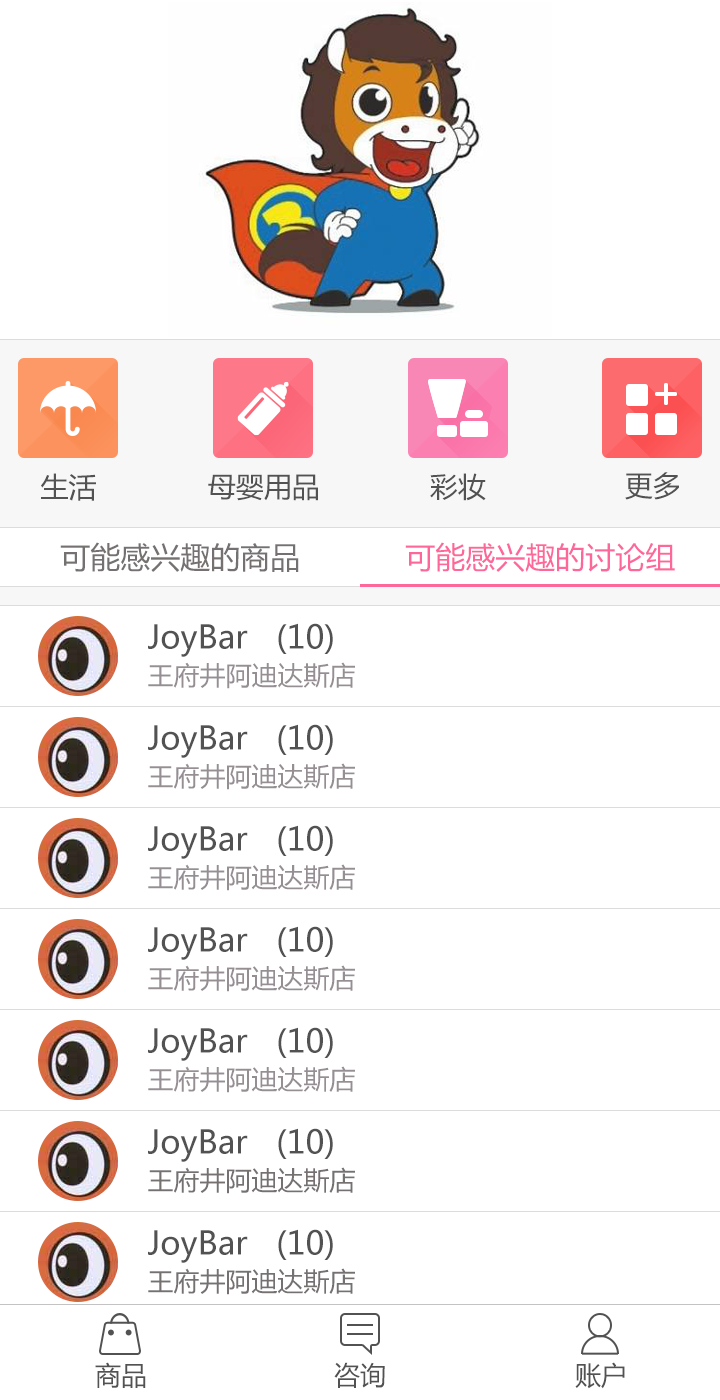
<style>
.page{position:relative;width:720px;height:1400px;background:#ffffff}
.page>*{position:absolute;margin:0}
.t1{font:28px "MicrosoftYaHei";color:#525252}
.t2{font:30px "MicrosoftYaHei";color:#757171}
.t3{font:30px "MicrosoftYaHei";color:#fd679a}
.t4{font:32px "MicrosoftYaHei";color:#525252}
.t5{font:26px "MicrosoftYaHei";color:#958f93}
.t6{font:26px "MicrosoftYaHei";color:#757171}
.t7{font:26px "MicrosoftYaHei";color:#525252}
</style>
<div class="page">
<p class="t1" style="left:41px;top:473px;width:55px;height:28px">生活</p>
<p class="t1" style="left:430px;top:473px;width:56px;height:28px">彩妆</p>
<p class="t1" style="left:625px;top:472px;width:54px;height:28px">更多</p>
<p class="t1" style="left:208px;top:474px;width:110px;height:27px">母婴用品</p>
<p class="t2" style="left:60px;top:542px;width:239px;height:30px">可能感兴趣的商品</p>
<p class="t3" style="left:405px;top:542px;width:270px;height:30px">可能感兴趣的讨论组</p>
<p class="t4" style="left:148px;top:623px;width:185px;height:34px">JoyBar   (10)</p>
<p class="t5" style="left:148px;top:662px;width:207px;height:27px">王府井阿迪达斯店</p>
<p class="t4" style="left:148px;top:724px;width:185px;height:34px">JoyBar   (10)</p>
<p class="t5" style="left:148px;top:763px;width:207px;height:27px">王府井阿迪达斯店</p>
<p class="t4" style="left:148px;top:825px;width:185px;height:34px">JoyBar   (10)</p>
<p class="t5" style="left:148px;top:864px;width:207px;height:27px">王府井阿迪达斯店</p>
<p class="t4" style="left:148px;top:926px;width:185px;height:34px">JoyBar   (10)</p>
<p class="t5" style="left:148px;top:965px;width:207px;height:27px">王府井阿迪达斯店</p>
<p class="t4" style="left:148px;top:1027px;width:185px;height:34px">JoyBar   (10)</p>
<p class="t5" style="left:148px;top:1066px;width:207px;height:27px">王府井阿迪达斯店</p>
<p class="t4" style="left:148px;top:1128px;width:185px;height:34px">JoyBar   (10)</p>
<p class="t6" style="left:148px;top:1167px;width:207px;height:27px">王府井阿迪达斯店</p>
<p class="t4" style="left:148px;top:1229px;width:185px;height:34px">JoyBar   (10)</p>
<p class="t6" style="left:148px;top:1268px;width:207px;height:27px">王府井阿迪达斯店</p>
<p class="t7" style="left:95px;top:1362px;width:51px;height:26px">商品</p>
<p class="t7" style="left:334px;top:1362px;width:51px;height:26px">咨询</p>
<p class="t7" style="left:575px;top:1362px;width:50px;height:27px">账户</p>
</div>
